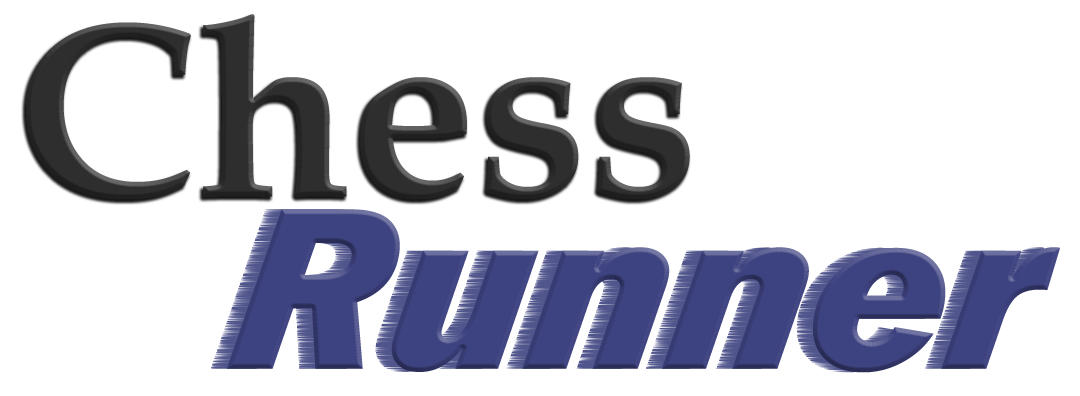
<style>
.page{position:relative;width:1080px;height:396px;background:#ffffff}
.page>*{position:absolute;margin:0}
.t1{font:251px "BookAntiqua-Bold";color:#2e2e2e}
.t2{font:239px "FranklinGothic-HeavyItalic";color:#3d4280;font-style:italic}
</style>
<div class="page">
<p class="t1" style="left:26px;top:14px;width:664px;height:185px">Chess</p>
<p class="t2" style="left:227px;top:209px;width:833px;height:164px">Runner</p>
</div>
